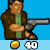
<style>
.page{position:relative;width:50px;height:50px;background:#00afe8}
.page>*{position:absolute;margin:0}
.t1{font:10px "MFWenYan_Noncommercial-Regular";letter-spacing:-0.06em;color:#ffffff}
</style>
<div class="page">
<p class="t1" style="left:25px;top:42px;width:12px;height:7px">40</p>
</div>
